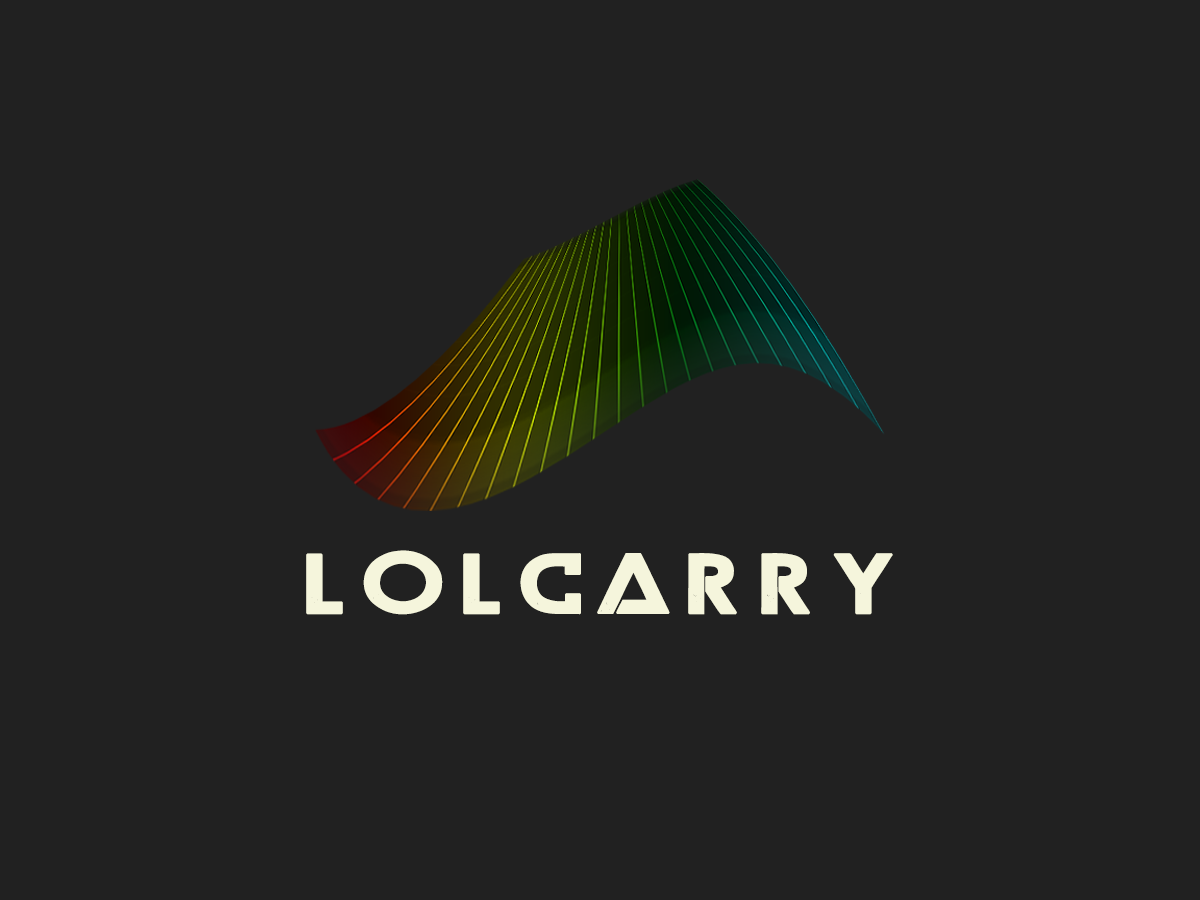
<style>
.page{position:relative;width:1200px;height:900px;background:#212121}
.page>*{position:absolute;margin:0}
.t1{font:83.3px "OuterspaceMilitia";color:#f5f5dc;font-weight:bold;scale:0.8 1}
</style>
<div class="page">
<p class="t1" style="left:306px;top:550px;width:587px;height:65px">LolCarry</p>
</div>
